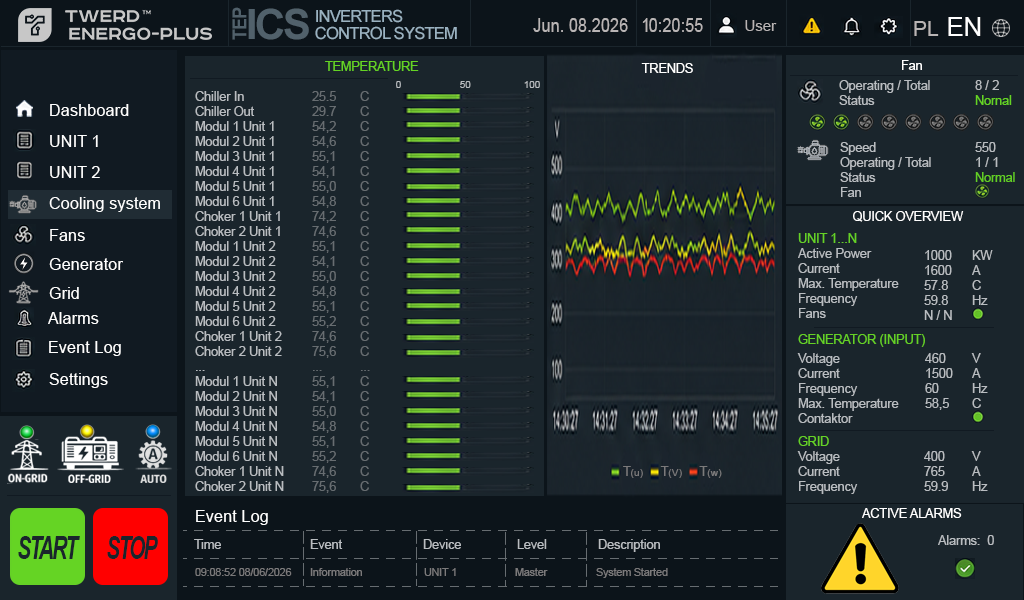
<style>
.page{position:relative;width:1024px;height:600px;background:#1a252c}
.page>*{position:absolute;margin:0}
.t1{font:19.1px "Arial-BoldMT";letter-spacing:-0.05em;color:#51616b;scale:0.94 1}
.t2{font:41.7px "Arial-BoldMT";letter-spacing:-0.05em;color:#51616b}
.t3{font:16.7px/16.7px "ArialMT";letter-spacing:-0.05em;color:#9ab2c1}
.t4{font:25.7px "ArialMT";color:#ffffff}
.t5{font:19px "ArialMT";color:#b9b5b5;scale:0.86 1}
.t6{font:15px "ArialMT";color:#b9b5b5}
.t7{font:21px "ArialMT";color:#b9b5b5}
.t8{font:12.5px "ArialMT";color:#65d424}
.t9{font:12.5px "ArialMT";color:#ffffff}
.t10{font:10px "ArialMT";color:#b9bdc1}
.t11{font:12.5px "ArialMT";color:#b9bdc1}
.t12{font:12.5px "ArialMT";color:#676d71}
.t13{font:16.4px "ArialMT";color:#ffffff}
.t14{font:12.5px "ArialMT";color:#63cf24}
.t15{font:12.5px "ArialMT";color:#65d126}
.t16{font:10.4px "ArialMT";color:#7b7a7b}
.t17{font:12.5px "ArialMT";color:#7b7a7b}
.t18{font:32.4px "Arial-BoldItalicMT";letter-spacing:-0.075em;color:#1a252c;scale:0.63 1}
.t19{font:10.5px "ArialMT";color:#7b7a7b}
</style>
<div class="page">
<p class="t1" style="left:232px;top:7px;width:15px;height:33px;rotate:-90deg">TEP</p>
<p class="t2" style="left:248px;top:8px;width:61px;height:32px">ICS</p>
<p class="t3" style="left:315px;top:9px;width:142px;height:31px">INVERTERS <br>CONTROL SYSTEM</p>
<p class="t4" style="left:948px;top:17px;width:33px;height:19px">EN</p>
<p class="t5" style="left:533px;top:18px;width:95px;height:14px">Jun. 08.2026</p>
<p class="t5" style="left:642px;top:18px;width:61px;height:14px">10:20:55</p>
<p class="t6" style="left:745px;top:20px;width:32px;height:11px">User</p>
<p class="t7" style="left:914px;top:21px;width:25px;height:15px">PL</p>
<p class="t8" style="left:325px;top:61px;width:94px;height:10px">TEMPERATURE</p>
<p class="t9" style="left:641px;top:63px;width:52px;height:10px">TRENDS</p>
<p class="t9" style="left:902px;top:60px;width:20px;height:10px">Fan</p>
<p class="t10" style="left:396px;top:81px;width:144px;height:7px">0                     50                   100</p>
<p class="t11" style="left:839px;top:80px;width:91px;height:25px">Operating / Total <br>Status</p>
<p class="t8" style="left:975px;top:80px;width:37px;height:25px"><span class="t11">8 / 2<br></span>Nornal</p>
<p class="t11" style="left:195px;top:91px;width:89px;height:400px">Chiller In <br>Chiller Out<br>Modul 1 Unit 1<br>Modul 2 Unit 1<br>Modul 3 Unit 1<br>Modul 4 Unit 1<br>Modul 5 Unit 1<br>Modul 6 Unit 1<br>Choker 1 Unit 1<br>Choker 2 Unit 1<br>Modul 1 Unit 2<br>Modul 2 Unit 2<br>Modul 3 Unit 2<br>Modul 4 Unit 2<br>Modul 5 Unit 2<br>Modul 6 Unit 2<br>Choker 1 Unit 2<br>Choker 2 Unit 2<br>...<br>Modul 1 Unit N<br>Modul 2 Unit N<br>Modul 3 Unit N<br>Modul 4 Unit N<br>Modul 5 Unit N<br>Modul 6 Unit N<br>Choker 1 Unit N<br>Choker 2 Unit N</p>
<p class="t12" style="left:312px;top:91px;width:24px;height:402px">25.5 <br>29.7<br>54,2<br>54,6<br>55,1<br>54,1<br>55,0<br>54,8<br>74,2<br>74,6<br>55,1<br>54,1<br>55,0<br>54,8<br>55,1<br>55,2<br>74,6<br>75,6<br>...<br>55,1<br>54,1<br>55,0<br>54,8<br>55,1<br>55,2<br>74,6<br>75,6</p>
<p class="t12" style="left:360px;top:91px;width:10px;height:400px">C<br>C<br>C<br>C<br>C<br>C<br>C<br>C<br>C<br>C<br>C<br>C<br>C<br>C<br>C<br>C<br>C<br>C<br>...<br>C<br>C<br>C<br>C<br>C<br>C<br>C<br>C</p>
<p class="t13" style="left:50px;top:104px;width:79px;height:12px">Dashboard</p>
<p class="t13" style="left:50px;top:135px;width:48px;height:12px">UNIT 1</p>
<p class="t11" style="left:840px;top:142px;width:91px;height:55px">Speed<br>Operating / Total <br>Status<br>Fan</p>
<p class="t11" style="left:975px;top:142px;width:40px;height:40px">550<br>1 / 1<br><span class="t14">Normal</span></p>
<p class="t13" style="left:50px;top:166px;width:50px;height:12px">UNIT 2</p>
<p class="t13" style="left:49px;top:197px;width:111px;height:15px">Cooling system</p>
<p class="t9" style="left:853px;top:211px;width:111px;height:11px">QUICK OVERVIEW</p>
<p class="t13" style="left:50px;top:229px;width:35px;height:12px">Fans</p>
<p class="t15" style="left:798px;top:233px;width:59px;height:10px">UNIT 1...N</p>
<p class="t11" style="left:798px;top:248px;width:101px;height:70px">Active Power <br>Current <br>Max. Temperature<br>Frequency<br>Fans</p>
<p class="t11" style="left:924px;top:250px;width:28px;height:70px">1000<br>1600 <br>57.8 <br>59.8 <br>N / N</p>
<p class="t11" style="left:972px;top:250px;width:21px;height:55px">KW <br>A <br>C <br>Hz</p>
<p class="t13" style="left:49px;top:258px;width:74px;height:12px">Generator</p>
<p class="t13" style="left:49px;top:287px;width:30px;height:12px">Grid</p>
<p class="t13" style="left:48px;top:312px;width:51px;height:12px">Alarms</p>
<p class="t13" style="left:49px;top:341px;width:72px;height:15px">Event Log</p>
<p class="t15" style="left:798px;top:334px;width:127px;height:13px">GENERATOR (INPUT)</p>
<p class="t11" style="left:797px;top:353px;width:102px;height:70px">Voltage<br>Current <br>Frequency<br>Max. Temperature<br>Contaktor</p>
<p class="t11" style="left:925px;top:353px;width:28px;height:57px">460<br>1500<br>60<br>58,5</p>
<p class="t11" style="left:971px;top:353px;width:17px;height:55px">V<br>A<br>Hz<br>C</p>
<p class="t13" style="left:49px;top:373px;width:59px;height:15px">Settings</p>
<p class="t15" style="left:798px;top:436px;width:31px;height:10px">GRID</p>
<p class="t11" style="left:797px;top:451px;width:61px;height:43px">Voltage<br>Current <br>Frequency</p>
<p class="t11" style="left:924px;top:451px;width:24px;height:40px">400<br>765<br>59.9</p>
<p class="t11" style="left:971px;top:451px;width:17px;height:40px">V<br>A<br>Hz</p>
<p class="t16" style="left:623px;top:466px;width:99px;height:12px"><span class="t17">T</span>(u)      <span class="t17">T</span>(V)      <span class="t17">T</span>(w)</p>
<p class="t13" style="left:196px;top:510px;width:72px;height:15px">Event Log</p>
<p class="t9" style="left:862px;top:508px;width:100px;height:10px">ACTIVE ALARMS</p>
<p class="t18" style="left:18px;top:536px;width:62px;height:23px">START</p>
<p class="t18" style="left:107px;top:536px;width:51px;height:23px">STOP</p>
<p class="t11" style="left:194px;top:539px;width:27px;height:10px">Time</p>
<p class="t11" style="left:310px;top:539px;width:33px;height:10px">Event</p>
<p class="t11" style="left:423px;top:539px;width:38px;height:10px">Device</p>
<p class="t11" style="left:517px;top:539px;width:30px;height:10px">Level</p>
<p class="t11" style="left:598px;top:539px;width:62px;height:13px">Description</p>
<p class="t11" style="left:938px;top:535px;width:56px;height:10px">Alarms:  0</p>
<p class="t19" style="left:195px;top:568px;width:97px;height:8px">09:08:52 08/06/2026</p>
<p class="t19" style="left:310px;top:568px;width:52px;height:8px">Information</p>
<p class="t19" style="left:424px;top:568px;width:32px;height:8px">UNIT 1</p>
<p class="t19" style="left:515px;top:568px;width:33px;height:8px">Master</p>
<p class="t19" style="left:596px;top:568px;width:72px;height:10px">System Started</p>
</div>
